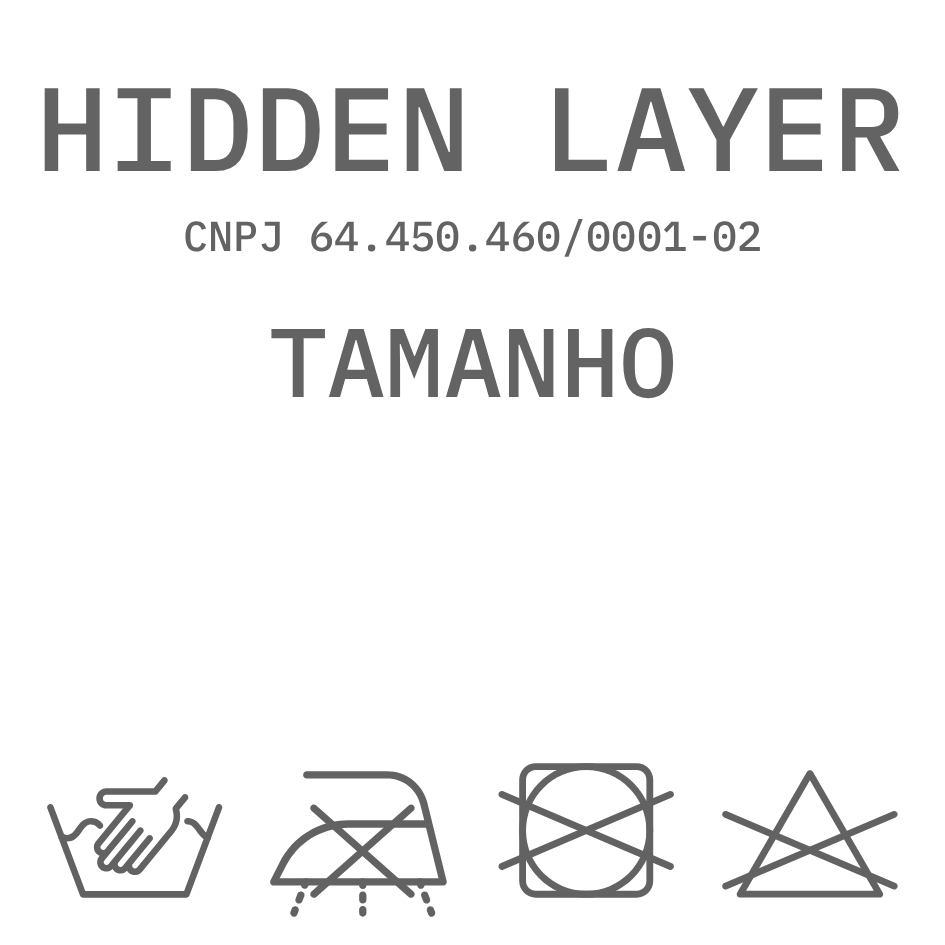
<style>
.page{position:relative;width:945px;height:945px;background:#ffffff}
.page>*{position:absolute;margin:0}
.t1{font:118.6px "IBMPlexMono-Medium";color:#636363}
.t2{font:42px "IBMPlexMono-Medium";color:#636363}
.t3{font:97.3px "IBMPlexMono-Medium";color:#636363}
</style>
<div class="page">
<p class="t1" style="left:44px;top:88px;width:856px;height:83px">HIDDEN LAYER</p>
<p class="t2" style="left:185px;top:219px;width:575px;height:38px">CNPJ 64.450.460/0001-02</p>
<p class="t3" style="left:271px;top:327px;width:403px;height:72px">TAMANHO</p>
</div>
